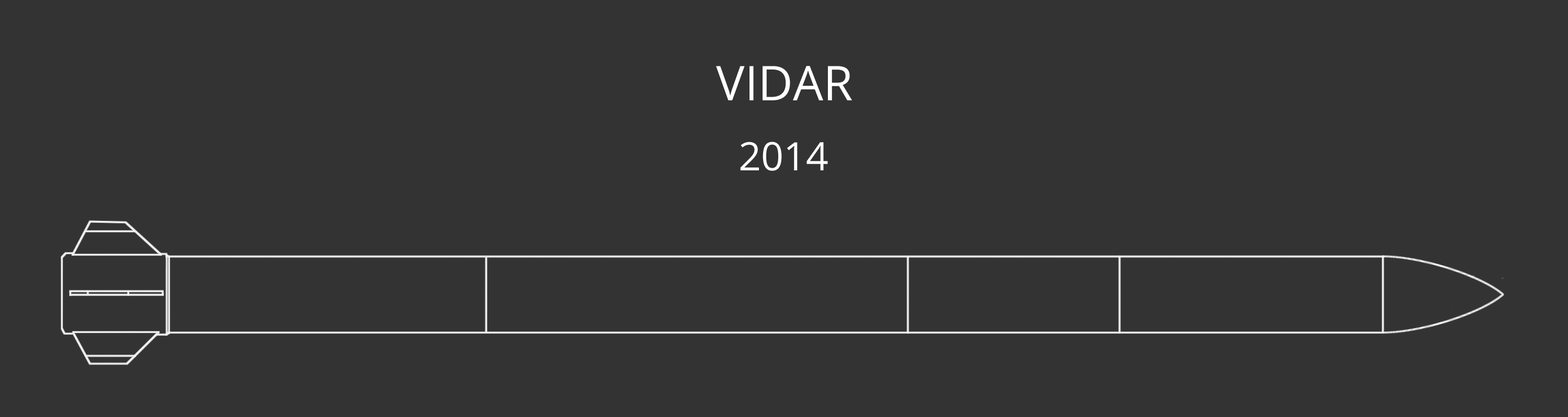
<style>
.page{position:relative;width:1568px;height:417px;background:#333333}
.page>*{position:absolute;margin:0}
.t1{font:47.9px "OpenSans";color:#ffffff}
.t2{font:39.2px "OpenSans";color:#ffffff}
</style>
<div class="page">
<p class="t1" style="left:716px;top:66px;width:136px;height:34px">VIDAR</p>
<p class="t2" style="left:740px;top:142px;width:88px;height:29px">2014</p>
</div>
